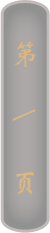
<style>
.page{position:relative;width:50px;height:233px}
.page>*{position:absolute;margin:0}
.t1{font:28.3px "STXinwei";color:#dab681}
</style>
<div class="page">
<p class="t1" style="left:12px;top:41px;width:24px;height:153px">第      \       页</p>
</div>
